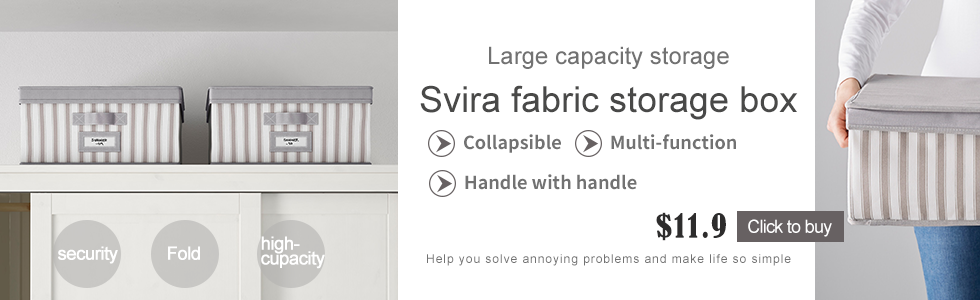
<style>
.page{position:relative;width:980px;height:300px;background:#ffffff}
.page>*{position:absolute;margin:0}
.t1{font:24px "ArialMT";color:#727272}
.t2{font:36px "ArialMT";color:#494948}
.t3{font:18px "SourceHanSansCN-Bold";color:#727272}
.t4{font:31.3px "BernardMT-Condensed";letter-spacing:0.06em;color:#2d2c2c}
.t5{font:18px "ArialMT";letter-spacing:-0.04em;color:#ffffff}
.t6{font:18px "ArialMT";letter-spacing:-0.04em;color:#ffffff;font-weight:bold}
.t7{font:18px/14.7px "ArialMT";letter-spacing:-0.04em;color:#ffffff;font-weight:bold}
.t8{font:12px "ArialMT";letter-spacing:0.08em;color:#727272}
</style>
<div class="page">
<p class="t1" style="left:489px;top:46px;width:240px;height:23px">Large capacity storage</p>
<p class="t2" style="left:420px;top:85px;width:378px;height:35px">Svira fabric storage box</p>
<p class="t3" style="left:464px;top:134px;width:97px;height:19px">Collapsible</p>
<p class="t3" style="left:611px;top:134px;width:125px;height:16px">Multi-function</p>
<p class="t3" style="left:465px;top:174px;width:172px;height:16px">Handle with handle</p>
<p class="t4" style="left:656px;top:212px;width:70px;height:29px">$11.9</p>
<p class="t5" style="left:748px;top:219px;width:84px;height:18px">Click to buy</p>
<p class="t6" style="left:58px;top:246px;width:60px;height:18px">security</p>
<p class="t6" style="left:168px;top:246px;width:32px;height:14px">Fold</p>
<p class="t7" style="left:261px;top:236px;width:64px;height:33px">high-<br>cupacity</p>
<p class="t8" style="left:427px;top:254px;width:364px;height:12px">Help you solve annoying problems and make life so simple</p>
</div>
